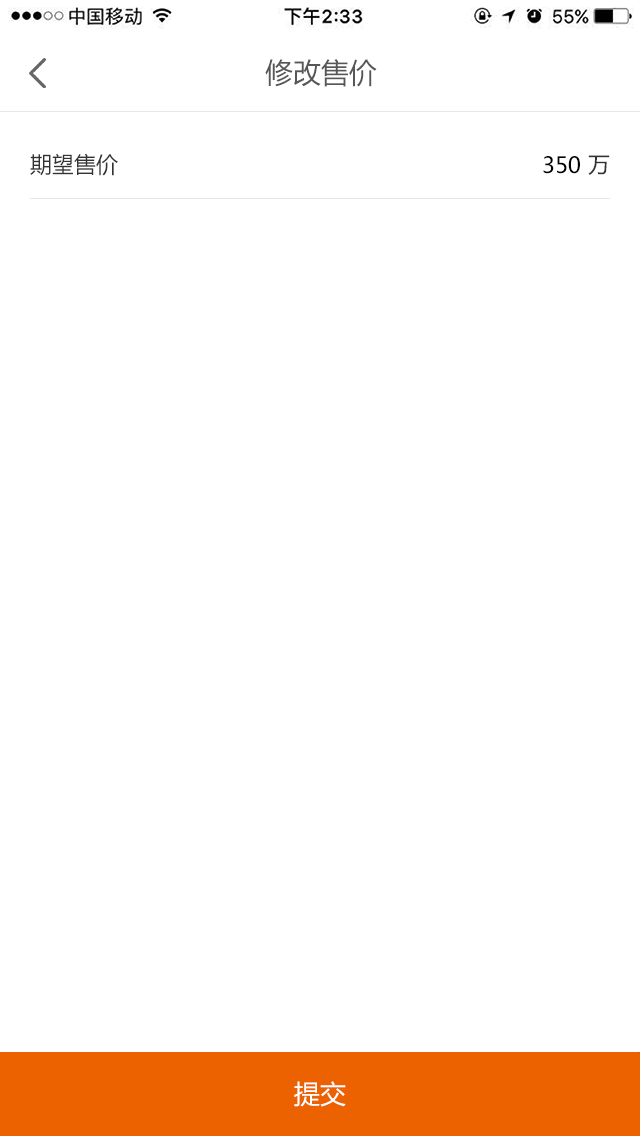
<style>
.page{position:relative;width:640px;height:1136px;background:#ffffff}
.page>*{position:absolute;margin:0}
.t1{font:28px "MicrosoftYaHei";color:#585757}
.t2{font:22px "MicrosoftYaHei";color:#333333}
.t3{font:22px "MicrosoftYaHei";color:#000000}
.t4{font:26px "MicrosoftYaHei";color:#ffffff}
</style>
<div class="page">
<p class="t1" style="left:265px;top:59px;width:112px;height:28px">修改售价</p>
<p class="t2" style="left:30px;top:153px;width:88px;height:23px">期望售价</p>
<p class="t3" style="left:543px;top:156px;width:37px;height:18px">350</p>
<p class="t2" style="left:588px;top:155px;width:22px;height:20px">万</p>
<p class="t4" style="left:294px;top:1081px;width:52px;height:26px">提交</p>
</div>
